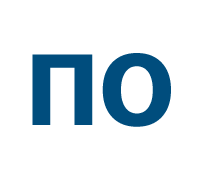
<style>
.page{position:relative;width:200px;height:170px;background:#ffffff}
.page>*{position:absolute;margin:0}
.t1{font:97px "Tahoma-Bold";color:#004d7d}
</style>
<div class="page">
<p class="t1" style="left:32px;top:53px;width:139px;height:74px">ПО</p>
</div>
